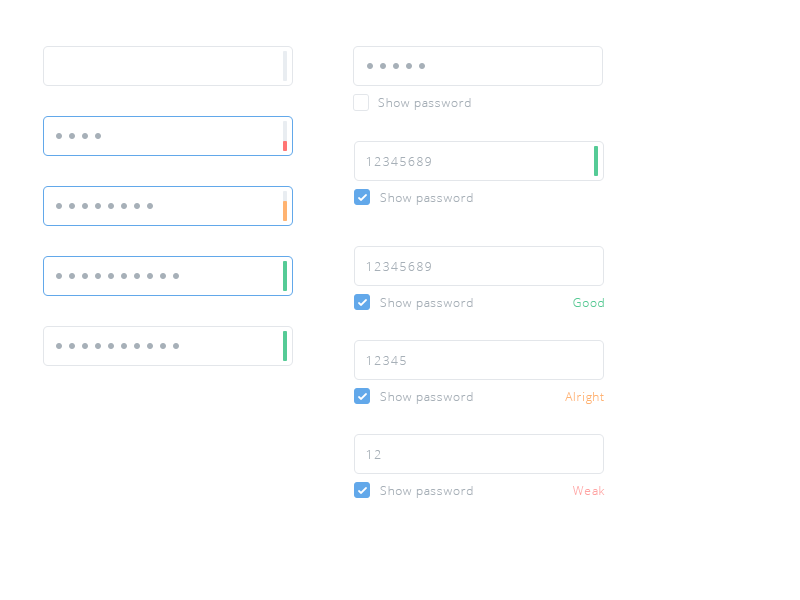
<style>
.page{position:relative;width:800px;height:600px;background:#ffffff}
.page>*{position:absolute;margin:0}
.t1{font:12px "OpenSans-Light";letter-spacing:0.05em;color:#a7b0b8}
.t2{font:12px "OpenSans-Light";letter-spacing:0.12em;color:#a7b0b8}
.t3{font:12px "OpenSans-Light";letter-spacing:0.05em;color:#55cb96}
.t4{font:12px "OpenSans-Light";letter-spacing:0.05em;color:#ffb371}
.t5{font:12px "OpenSans-Light";letter-spacing:0.05em;color:#ffa3a2}
</style>
<div class="page">
<p class="t1" style="left:378px;top:98px;width:93px;height:12px">Show password</p>
<p class="t2" style="left:366px;top:157px;width:65px;height:9px">12345689</p>
<p class="t1" style="left:380px;top:193px;width:93px;height:12px">Show password</p>
<p class="t2" style="left:366px;top:262px;width:65px;height:9px">12345689</p>
<p class="t1" style="left:380px;top:298px;width:93px;height:12px">Show password</p>
<p class="t3" style="left:573px;top:298px;width:31px;height:9px">Good</p>
<p class="t2" style="left:366px;top:356px;width:40px;height:9px">12345</p>
<p class="t1" style="left:380px;top:392px;width:93px;height:12px">Show password</p>
<p class="t4" style="left:565px;top:392px;width:39px;height:12px">Alright</p>
<p class="t2" style="left:366px;top:450px;width:15px;height:9px">12</p>
<p class="t1" style="left:380px;top:486px;width:93px;height:12px">Show password</p>
<p class="t5" style="left:573px;top:486px;width:32px;height:9px">Weak</p>
</div>
